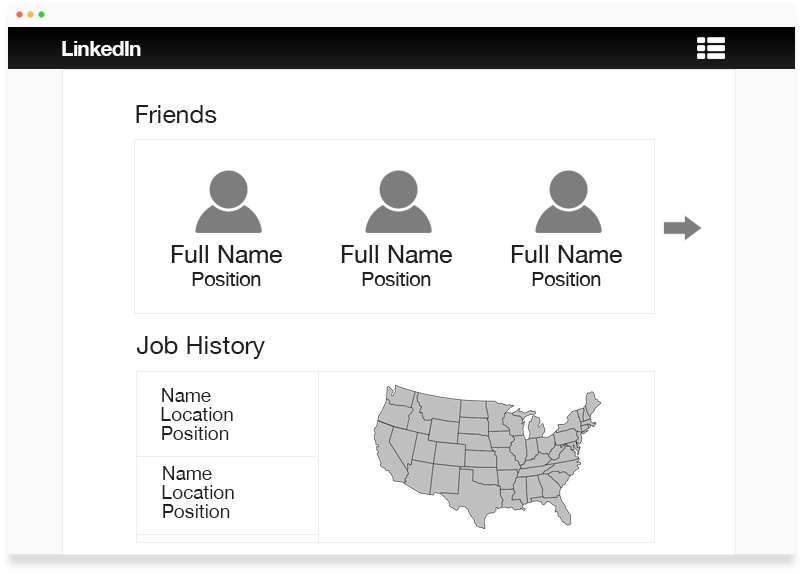
<style>
.page{position:relative;width:803px;height:574px;background:#ffffff}
.page>*{position:absolute;margin:0}
.t1{font:21.3px "HelveticaNeue-Bold";letter-spacing:-0.04em;color:#ffffff}
.t2{font:25px "HelveticaNeue";color:#1f1f1f}
.t3{font:19px "HelveticaNeue";color:#1f1f1f}
</style>
<div class="page">
<p class="t1" style="left:62px;top:41px;width:79px;height:15px">LinkedIn</p>
<p class="t2" style="left:136px;top:105px;width:81px;height:18px">Friends</p>
<p class="t2" style="left:136px;top:336px;width:129px;height:23px">Job History</p>
<p class="t3" style="left:162px;top:388px;width:49px;height:14px">Name</p>
<p class="t3" style="left:161px;top:407px;width:72px;height:14px">Location</p>
<p class="t3" style="left:162px;top:426px;width:67px;height:14px">Position</p>
<p class="t3" style="left:163px;top:466px;width:49px;height:14px">Name</p>
<p class="t3" style="left:162px;top:485px;width:72px;height:14px">Location</p>
<p class="t3" style="left:163px;top:504px;width:67px;height:14px">Position</p>
</div>
